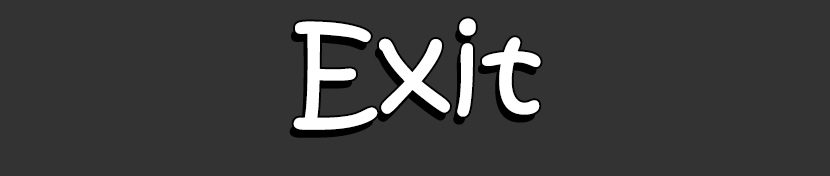
<style>
.page{position:relative;width:830px;height:176px;background:#333333}
.page>*{position:absolute;margin:0}
.t1{font:124.4px "KristenITC-Regular";color:#ffffff}
</style>
<div class="page">
<p class="t1" style="left:293px;top:18px;width:248px;height:112px">Exit</p>
</div>
